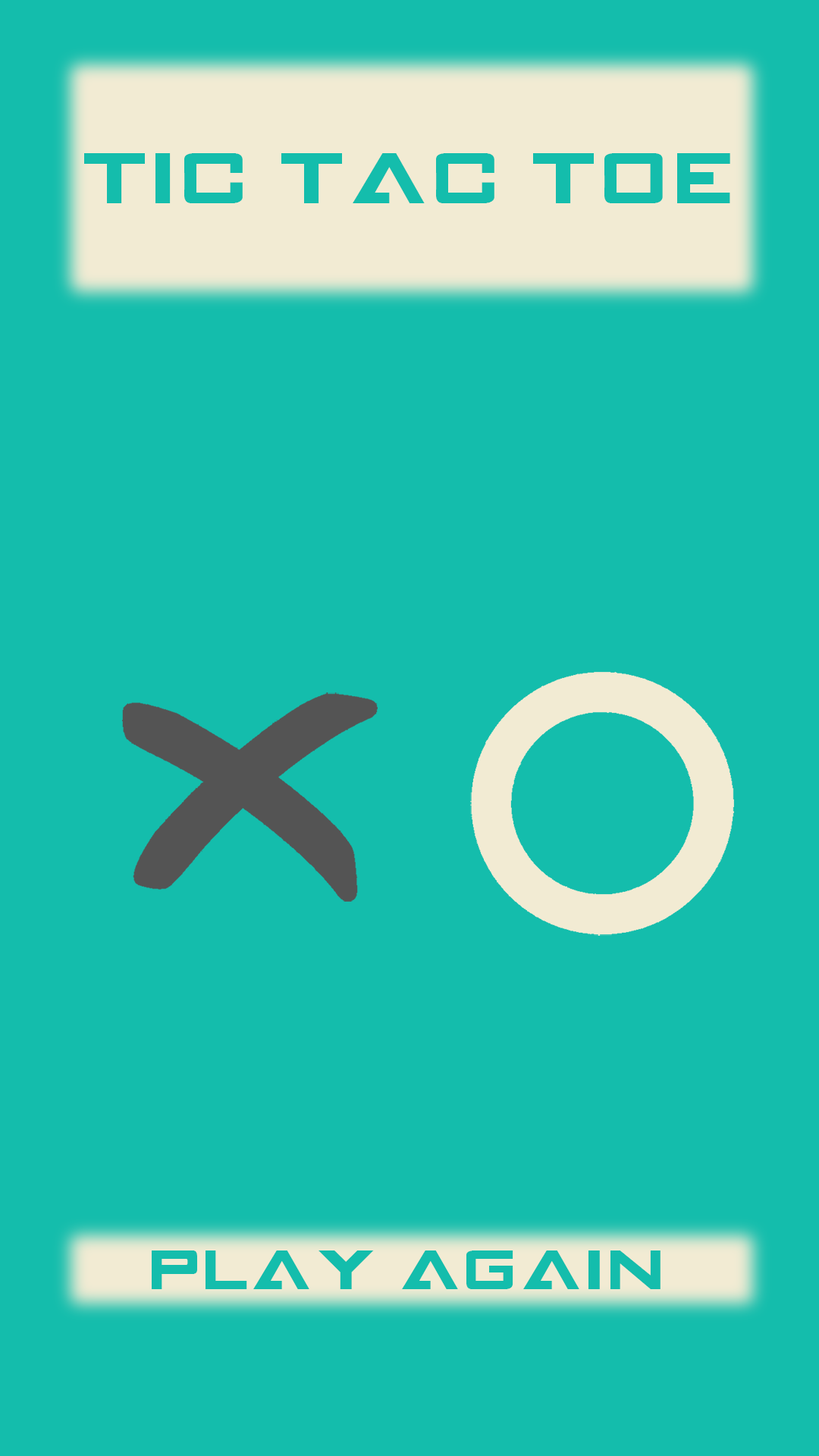
<style>
.page{position:relative;width:819px;height:1456px;background:#14bdac}
.page>*{position:absolute;margin:0}
.t1{font:62.2px "GAMECUBENDualSet";color:#14bdac}
.t2{font:48.5px "GAMECUBENDualSet";color:#14bdac}
</style>
<div class="page">
<p class="t1" style="left:84px;top:153px;width:646px;height:50px">TIC TAC TOE</p>
<p class="t2" style="left:152px;top:1250px;width:508px;height:39px">PLAY AGAIN</p>
</div>
